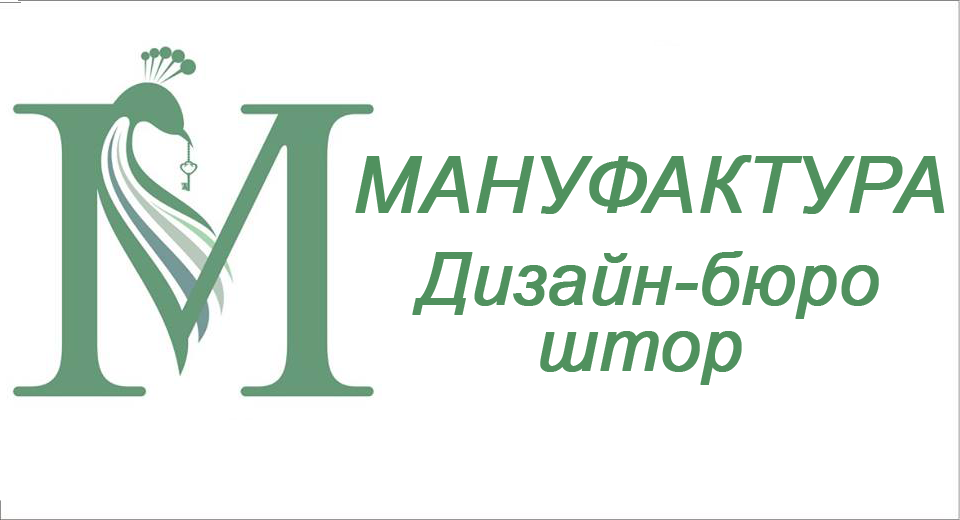
<style>
.page{position:relative;width:960px;height:520px;background:#ffffff}
.page>*{position:absolute;margin:0}
.t1{font:78px "Arial-ItalicMT";color:#50915e;font-weight:bold}
.t2{font:72px "Arial-ItalicMT";color:#50915e;font-weight:bold}
</style>
<div class="page">
<p class="t1" style="left:355px;top:155px;width:590px;height:59px">МАНУФАКТУРА</p>
<p class="t2" style="left:412px;top:251px;width:467px;height:68px">Дизайн-бюро</p>
<p class="t2" style="left:540px;top:331px;width:202px;height:54px">штор</p>
</div>
